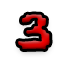
<style>
.page{position:relative;width:71px;height:71px;background:#ffffff}
.page>*{position:absolute;margin:0}
.t1{font:55px "Tipi-Organic"}
</style>
<div class="page">
<p class="t1" style="left:18px;top:14px;width:32px;height:35px">3</p>
</div>
